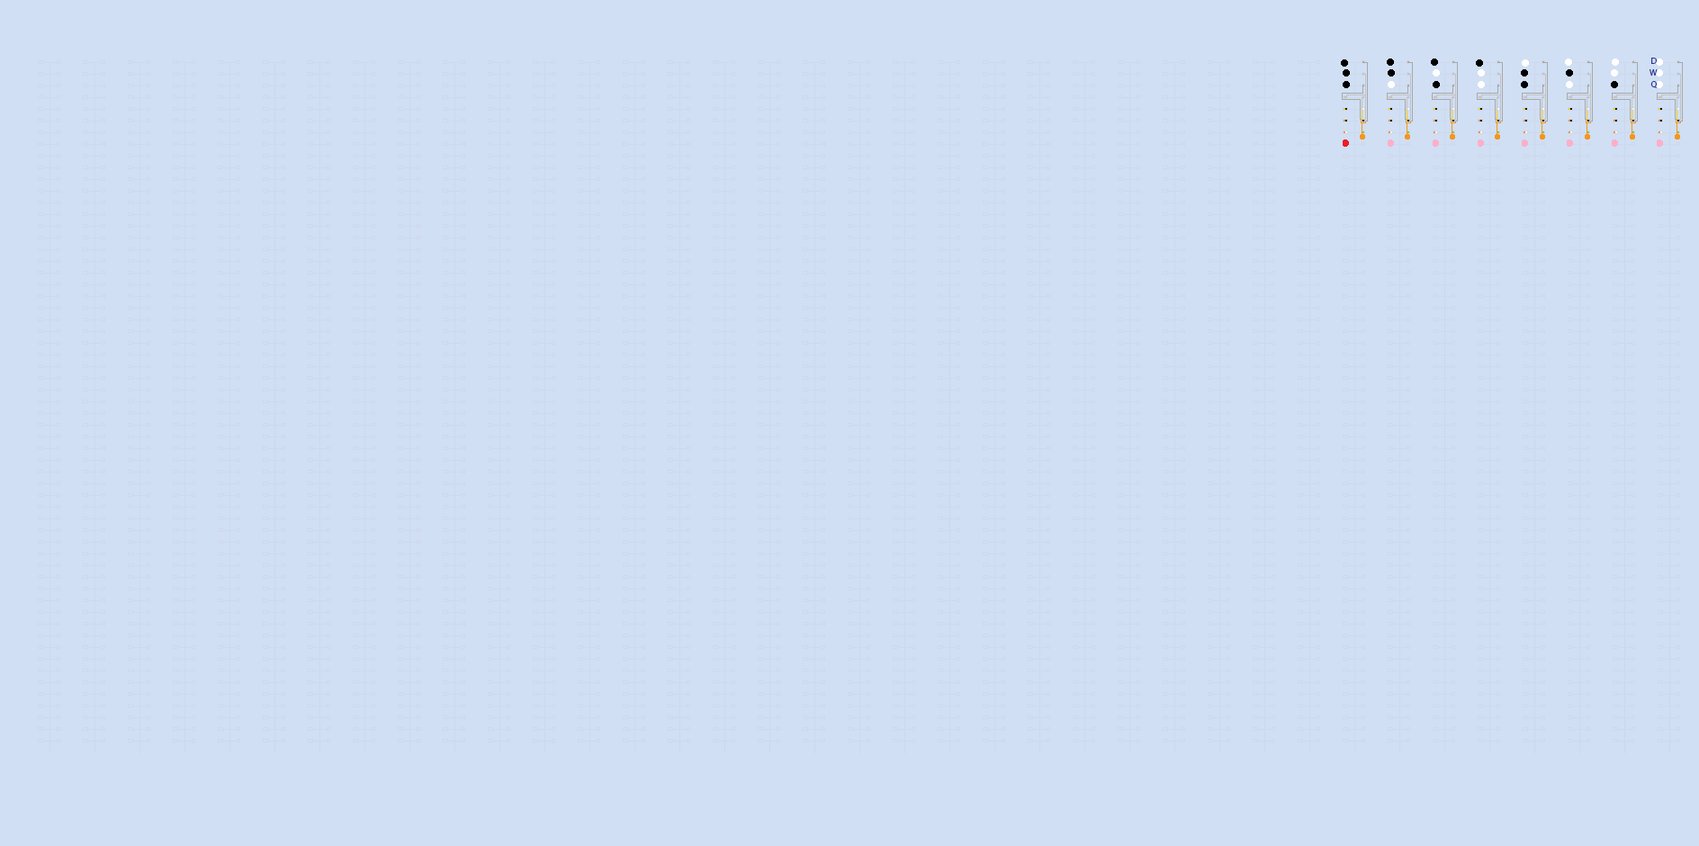
<style>
.page{position:relative;width:1699px;height:846px;background:#d0dff3}
.page>*{position:absolute;margin:0}
.t1{font:9px/11.7px "MyriadPro-Regular";color:#2e3192}
</style>
<div class="page">
<p class="t1" style="left:1650px;top:58px;width:8px;height:30px;text-align:right">D<br>W<br>Q</p>
</div>
